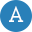
<style>
.page{position:relative;width:32px;height:32px;background:#2980b9}
.page>*{position:absolute;margin:0}
.t1{font:24px "PrestigeEliteStd-Bd";letter-spacing:0.025em;color:#ffffff}
</style>
<div class="page">
<p class="t1" style="left:9px;top:6px;width:15px;height:16px">A</p>
</div>
